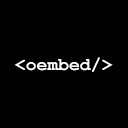
<style>
.page{position:relative;width:128px;height:128px;background:#000000}
.page>*{position:absolute;margin:0}
.t1{font:18px "CourierNewPS-BoldMT";color:#ffffff}
</style>
<div class="page">
<p class="t1" style="left:14px;top:57px;width:99px;height:15px">&lt;oembed/&gt;</p>
</div>
